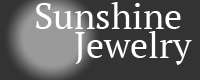
<style>
.page{position:relative;width:200px;height:80px;background:#333333}
.page>*{position:absolute;margin:0}
.t1{font:36px "PTSerif-Regular";color:#ffffff}
</style>
<div class="page">
<p class="t1" style="left:36px;top:2px;width:145px;height:27px">Sunshine</p>
<p class="t1" style="left:75px;top:31px;width:117px;height:34px">Jewelry</p>
</div>
